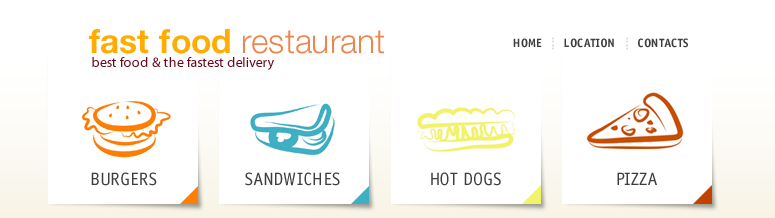
<style>
.page{position:relative;width:775px;height:218px;background:#ffffff}
.page>*{position:absolute;margin:0}
.t1{font:33.5px "HelveticaNeueLTPro-Lt";color:#ed844d}
.t2{font:33.5px "HelveticaNeueLTPro-Bd";color:#ffad03}
.t3{font:12px "OfficinaSansStd-Bold";color:#3e3e3e}
.t4{font:14px "MyriadPro-Regular";color:#6c061b}
.t5{font:18px "OfficinaSansStd-Book";color:#3e3e3e}
</style>
<div class="page">
<p class="t1" style="left:89px;top:29px;width:295px;height:25px"><span class="t2">fast food </span>restaurant</p>
<p class="t3" style="left:513px;top:38px;width:29px;height:10px">HOME</p>
<p class="t3" style="left:564px;top:38px;width:50px;height:10px">LOCATION</p>
<p class="t3" style="left:638px;top:38px;width:50px;height:10px">CONTACTS</p>
<p class="t4" style="left:92px;top:57px;width:182px;height:13px">best food &amp; the fastest delivery</p>
<p class="t5" style="left:91px;top:172px;width:66px;height:14px">BURGERS</p>
<p class="t5" style="left:245px;top:172px;width:95px;height:14px">SANDWICHES</p>
<p class="t5" style="left:431px;top:172px;width:70px;height:14px">HOT DOGS</p>
<p class="t5" style="left:617px;top:172px;width:40px;height:13px">PIZZA</p>
</div>
